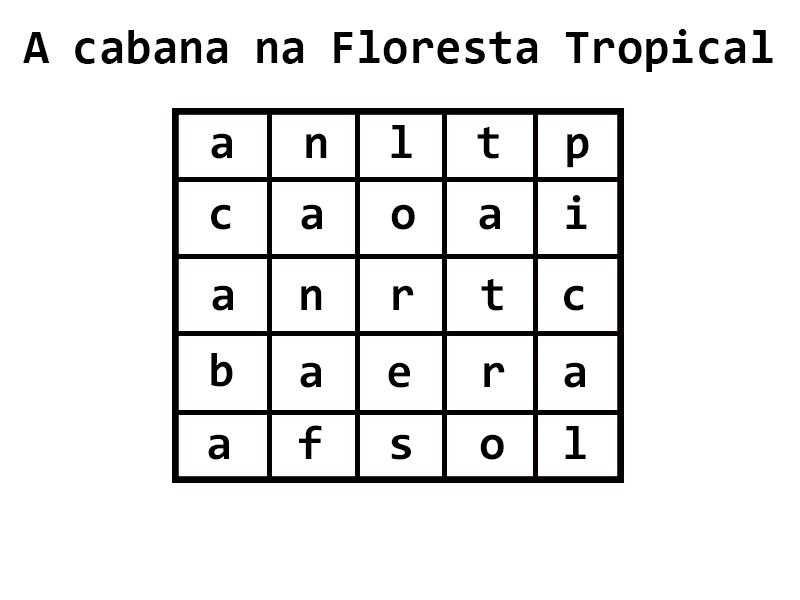
<style>
.page{position:relative;width:800px;height:600px;background:#ffffff}
.page>*{position:absolute;margin:0}
.t1{font:48px "Consolas-Bold";color:#000000}
.t2{font:48.1px "Consolas-Bold";color:#000000}
</style>
<div class="page">
<p class="t1" style="left:23px;top:29px;width:750px;height:43px">A cabana na Floresta Tropical</p>
<p class="t2" style="left:391px;top:125px;width:21px;height:33px">l</p>
<p class="t2" style="left:477px;top:126px;width:22px;height:33px">t</p>
<p class="t2" style="left:211px;top:133px;width:21px;height:26px">a</p>
<p class="t2" style="left:306px;top:133px;width:21px;height:25px">n</p>
<p class="t2" style="left:567px;top:133px;width:22px;height:35px">p</p>
<p class="t2" style="left:566px;top:195px;width:21px;height:34px">i</p>
<p class="t2" style="left:211px;top:204px;width:20px;height:26px">c</p>
<p class="t2" style="left:301px;top:204px;width:21px;height:26px">a</p>
<p class="t2" style="left:391px;top:204px;width:24px;height:26px">o</p>
<p class="t2" style="left:479px;top:204px;width:21px;height:26px">a</p>
<p class="t2" style="left:481px;top:278px;width:22px;height:33px">t</p>
<p class="t2" style="left:212px;top:285px;width:21px;height:26px">a</p>
<p class="t2" style="left:301px;top:285px;width:21px;height:25px">n</p>
<p class="t2" style="left:393px;top:285px;width:21px;height:25px">r</p>
<p class="t2" style="left:564px;top:285px;width:20px;height:26px">c</p>
<p class="t2" style="left:211px;top:353px;width:22px;height:34px">b</p>
<p class="t2" style="left:300px;top:362px;width:21px;height:26px">a</p>
<p class="t2" style="left:388px;top:362px;width:22px;height:26px">e</p>
<p class="t2" style="left:484px;top:362px;width:21px;height:25px">r</p>
<p class="t2" style="left:564px;top:362px;width:21px;height:26px">a</p>
<p class="t2" style="left:299px;top:425px;width:23px;height:34px">f</p>
<p class="t2" style="left:208px;top:434px;width:21px;height:26px">a</p>
<p class="t2" style="left:391px;top:434px;width:20px;height:26px">s</p>
<p class="t2" style="left:480px;top:434px;width:24px;height:26px">o</p>
<p class="t2" style="left:565px;top:426px;width:21px;height:33px">l</p>
</div>
